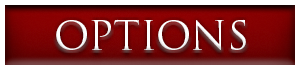
<style>
.page{position:relative;width:300px;height:70px}
.page>*{position:absolute;margin:0}
.t1{font:38.9px "TrajanPro-Regular";color:#ffffff}
</style>
<div class="page">
<p class="t1" style="left:56px;top:19px;width:190px;height:31px">OPTIONS</p>
</div>
